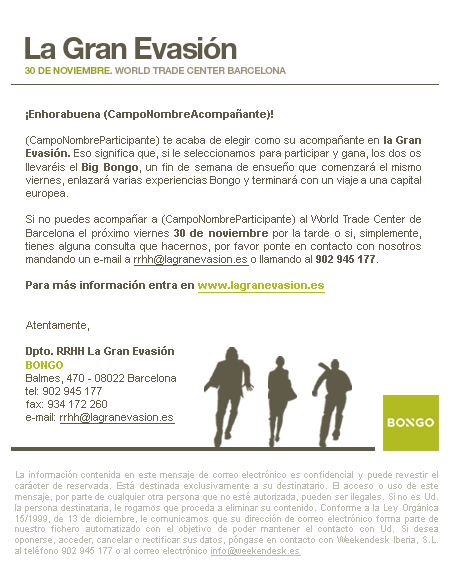
<style>
.page{position:relative;width:450px;height:580px;background:#ffffff}
.page>*{position:absolute;margin:0}
.t1{font:30px "HelveticaNeue-Bold";letter-spacing:-0.045em;color:#605a48}
.t2{font:9.5px "HelveticaNeue-Medium";color:#9d947a}
.t3{font:9.5px "HelveticaNeue-Medium";color:#98a123;text-transform:uppercase}
.t4{font:11px "ArialMT";color:#605a48}
.t5{font:11px "Arial-BoldMT";color:#605a48}
.t6{font:11px "ArialMT";color:#605a48;text-decoration:underline}
.t7{font:11px "Arial-BoldMT";color:#b1bc22;text-decoration:underline}
.t8{font:11px "Arial-BoldMT";color:#b1bc22}
.t9{font:9px "ArialMT";color:#bcb9af}
.t10{font:9px "ArialMT";color:#bcb9af;text-decoration:underline}
</style>
<div class="page">
<p class="t1" style="left:25px;top:37px;width:212px;height:22px">La Gran Evasión</p>
<p class="t2" style="left:25px;top:67px;width:261px;height:7px"><span class="t3">30 DE NOVIEMBRE.</span> WORLD TRADE CENTER BARCELONA</p>
<p class="t4" style="left:25px;top:109px;width:396px;height:315px;text-align:justify"><span class="t5">¡Enhorabuena (CampoNombreAcompañante)! </span><br><br>(CampoNombreParticipante) te acaba de elegir como su acompañante en<span class="t5"> la Gran Evasión.</span> Eso significa que, si le seleccionamos para participar y gana, los dos os llevaréis el <span class="t5">Big Bongo</span>, un fin de semana de ensueño que comenzará el mismo viernes, enlazará varias experiencias Bongo y terminará con un viaje a una capital europea. <br><br>Si no puedes acompañar a (CampoNombreParticipante) al World Trade Center de Barcelona el próximo viernes<span class="t5"> 30 de noviembre</span> por la tarde o si, simplemente, tienes alguna consulta que hacernos, por favor ponte en contacto con nosotros mandando un e-mail a <span class="t6">rrhh@lagranevasion.es</span> o llamando al <span class="t5">902 945 177</span>. <br><br><span class="t5">Para más información entra en </span><span class="t7">www.lagranevasion.es<br></span><br><br>Atentamente, <br><br><span class="t5">Dpto. RRHH La Gran Evasión</span><span class="t8"> <br>BONGO <br></span>Balmes, 470 - 08022 Barcelona <br>tel: 902 945 177 <br>fax: 934 172 260 <br>e-mail: <span class="t6">rrhh@lagranevasion.es</span></p>
<p class="t9" style="left:15px;top:470px;width:423px;height:86px;text-align:justify">La información contenida en este mensaje de correo electrónico es confidencial y puede revestir el carácter de reservada. Está destinada exclusivamente a su destinatario. El acceso o uso de este mensaje, por parte de cualquier otra persona que no esté autorizada, pueden ser ilegales. Si no es Ud. la persona destinataria, le rogamos que proceda a eliminar su contenido. Conforme a la Ley Orgánica 15/1999, de 13 de diciembre, le comunicamos que su dirección de correo electrónico forma parte de nuestro fichero automatizado con el objetivo de poder mantener el contacto con Ud. Si desea oponerse, acceder, cancelar o rectificar sus datos, póngase en contacto con Weekendesk Iberia, S.L. al teléfono 902 945 177 o al correo electrónico <span class="t10">info@weekendesk.es</span></p>
</div>
